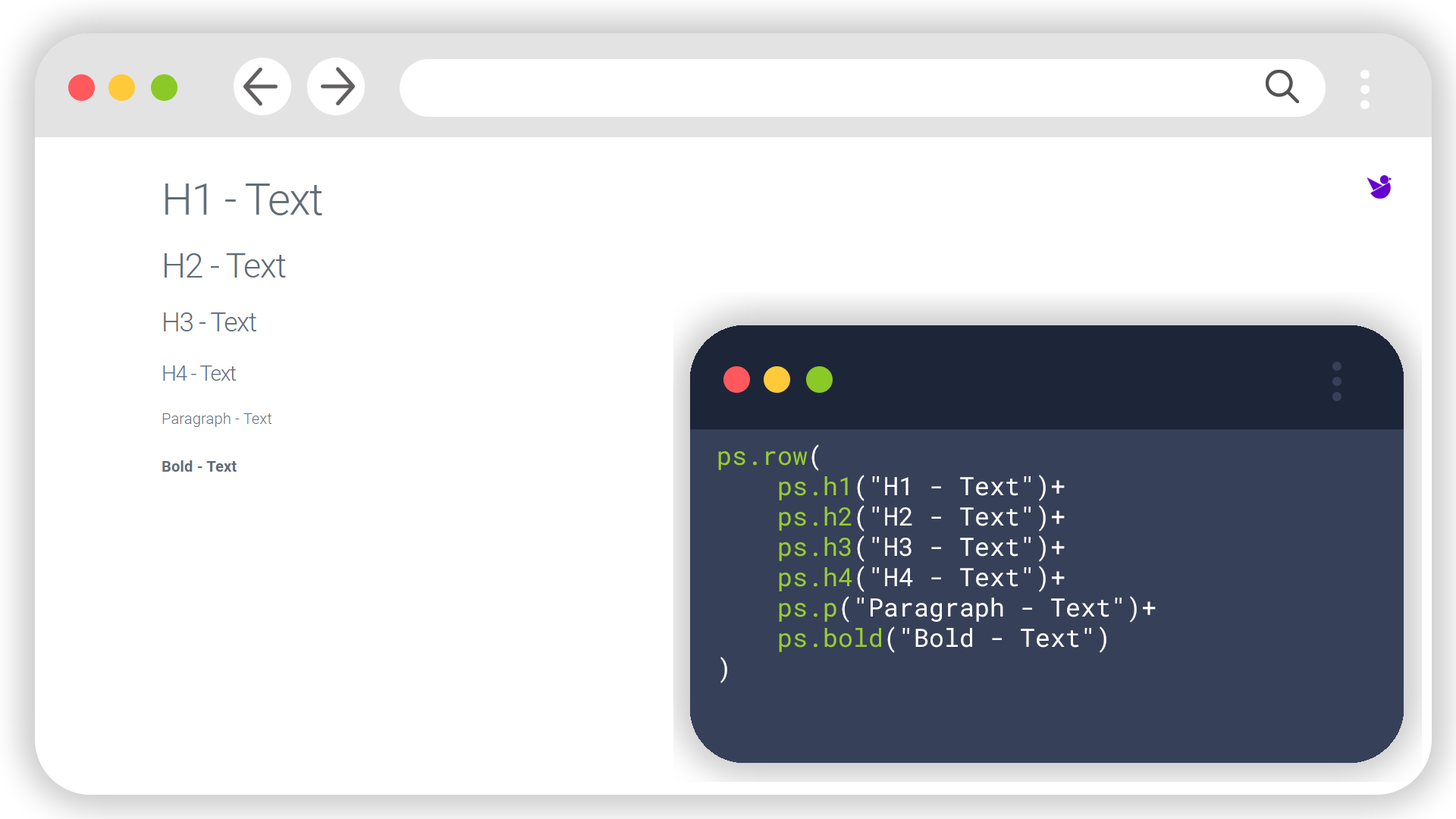
<style>
.page{position:relative;width:1456px;height:819px;background:#ffffff}
.page>*{position:absolute;margin:0}
.t1{font:25.3px "RobotoMono-Regular";color:#ffffff}
.t2{font:25.3px "RobotoMono-Regular";color:#99cc33}
</style>
<div class="page">
<p class="t1" style="left:718px;top:444px;width:438px;height:239px"><span class="t2">ps.row</span>(<br>    <span class="t2">ps.h1</span>("H1 - Text")+<br>    <span class="t2">ps.h2</span>("H2 - Text")+<br>    <span class="t2">ps.h3</span>("H3 - Text")+<br>    <span class="t2">ps.h4</span>("H4 - Text")+<br>    <span class="t2">ps.p</span>("Paragraph - Text")+<br>    <span class="t2">ps.bold</span>("Bold - Text")<br>)</p>
</div>
